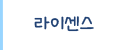
<style>
.page{position:relative;width:130px;height:50px;background:#ffffff}
.page>*{position:absolute;margin:0}
.t1{font:16.7px "THEAlien";color:#214274}
</style>
<div class="page">
<p class="t1" style="left:34px;top:16px;width:60px;height:16px">라이센스</p>
</div>
